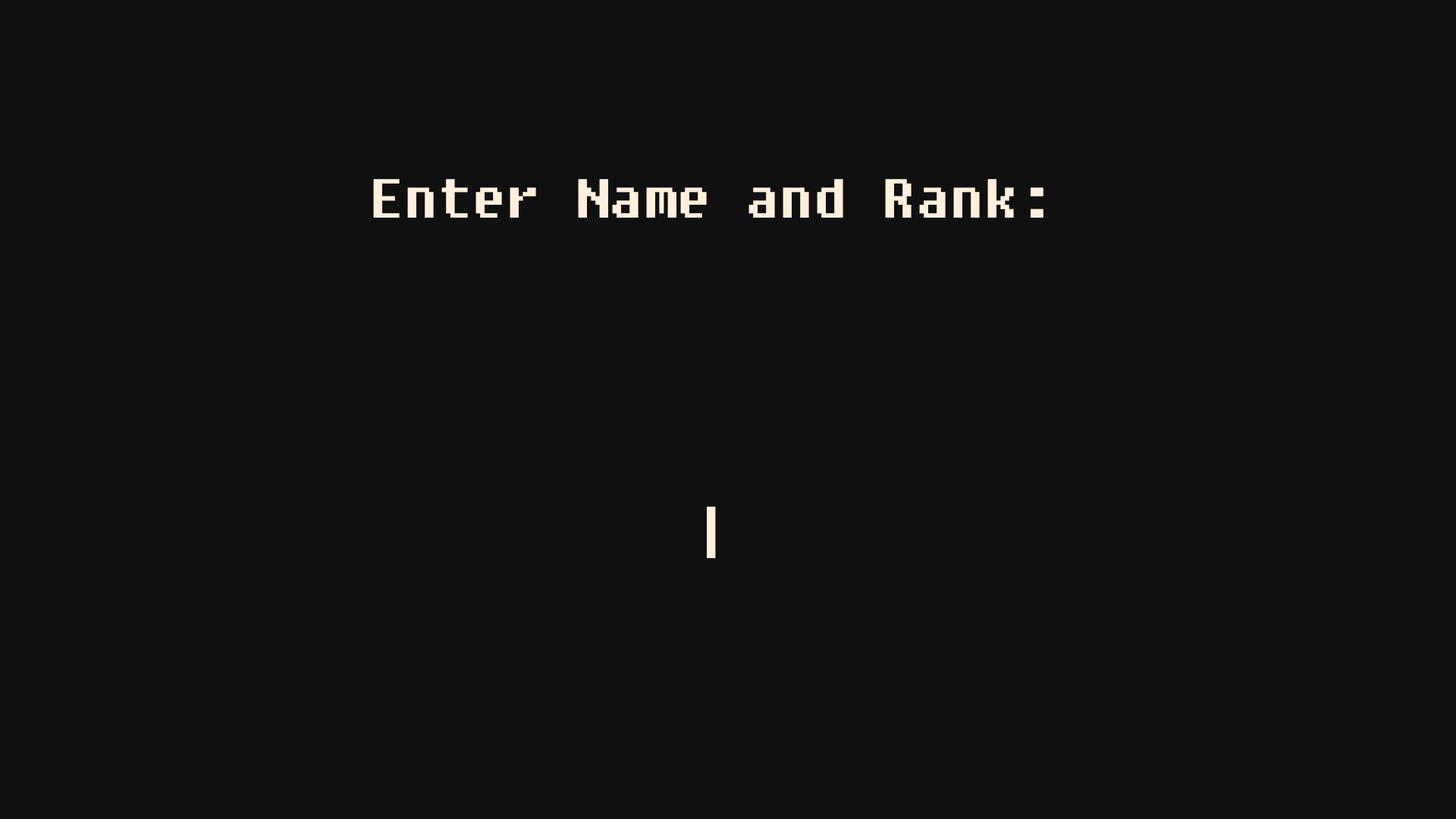
<style>
.page{position:relative;width:1456px;height:819px;background:#101010}
.page>*{position:absolute;margin:0}
.t1{font:54.6px "Fixedsys";color:#fff0dd}
</style>
<div class="page">
<p class="t1" style="left:373px;top:179px;width:670px;height:379px;text-align:center">Enter Name and Rank:<br><br><br><br><br>|</p>
</div>
